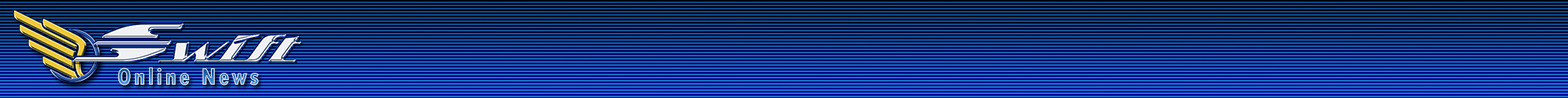
<style>
.page{position:relative;width:1568px;height:98px}
.page>*{position:absolute;margin:0}
.t1{font:25.1px "TwCenMT-CondensedExtraBold";letter-spacing:0.1em}
</style>
<div class="page">
<p class="t1" style="left:118px;top:67px;width:141px;height:18px">Online News</p>
</div>
